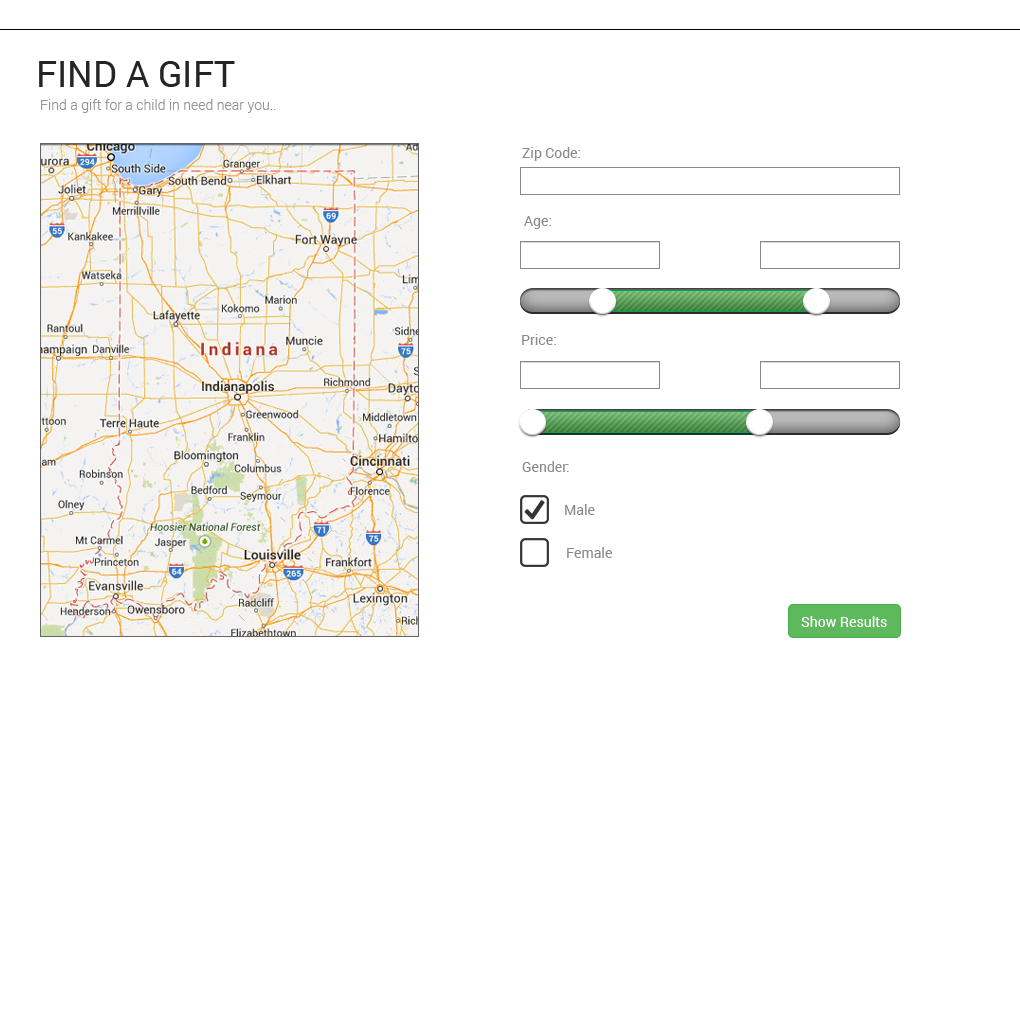
<style>
.page{position:relative;width:1020px;height:1020px;background:#ffffff}
.page>*{position:absolute;margin:0}
.t1{font:36px "Roboto-Regular";color:#252525}
.t2{font:14px "Roboto-Light";color:#959595}
.t3{font:14px "Roboto-Regular";color:#898989}
.t4{font:14px "Roboto-Regular";color:#ffffff}
</style>
<div class="page">
<p class="t1" style="left:39px;top:61px;width:196px;height:26px">FIND A GIFT</p>
<p class="t2" style="left:41px;top:99px;width:235px;height:14px">Find a gift for a child in need near you..</p>
<p class="t3" style="left:522px;top:147px;width:59px;height:14px">Zip Code:</p>
<p class="t3" style="left:524px;top:216px;width:28px;height:13px">Age:</p>
<p class="t3" style="left:522px;top:334px;width:34px;height:11px">Price:</p>
<p class="t3" style="left:522px;top:461px;width:47px;height:11px">Gender:</p>
<p class="t3" style="left:565px;top:504px;width:30px;height:11px">Male</p>
<p class="t3" style="left:567px;top:547px;width:45px;height:11px">Female</p>
<p class="t4" style="left:801px;top:616px;width:86px;height:11px">Show Results</p>
</div>
